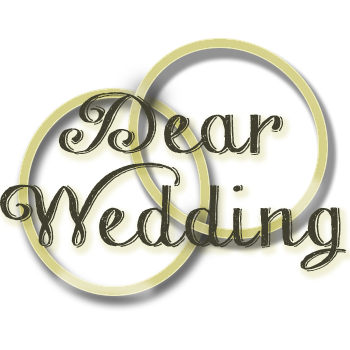
<style>
.page{position:relative;width:350px;height:350px;background:#ffffff}
.page>*{position:absolute;margin:0}
.t1{font:76.8px "Chalk-hand-lettering-shaded_demo";letter-spacing:0.05em;color:#403f2f;scale:1.26 1}
</style>
<div class="page">
<p class="t1" style="left:0px;top:92px;width:347px;height:180px;text-align:center">Dear <br>Wedding</p>
</div>
